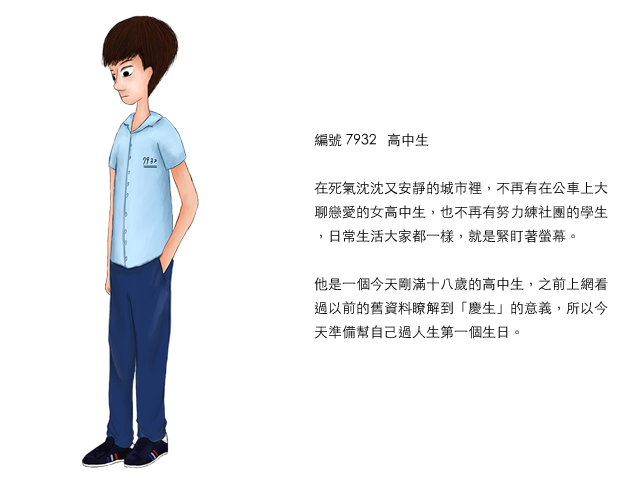
<style>
.page{position:relative;width:640px;height:480px;background:#ffffff}
.page>*{position:absolute;margin:0}
.t1{font:14px/24px "STHeitiTC-Light";color:#000000}
</style>
<div class="page">
<p class="t1" style="left:314px;top:133px;width:294px;height:206px">編號 7932   高中生<br><br>在死氣沈沈又安靜的城市裡，不再有在公車上大聊戀愛的女高中生，也不再有努力練社團的學生，日常生活大家都一樣，就是緊盯著螢幕。<br><br>他是一個今天剛滿十八歲的高中生，之前上網看過以前的舊資料瞭解到「慶生」的意義，所以今天準備幫自己過人生第一個生日。</p>
</div>
